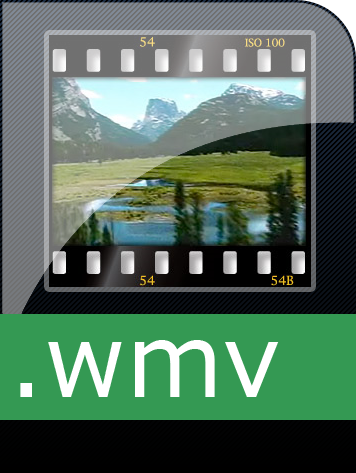
<style>
.page{position:relative;width:356px;height:473px;background:#349953}
.page>*{position:absolute;margin:0}
.t1{font:100px "Verdana";color:#ffffff}
</style>
<div class="page">
<p class="t1" style="left:20px;top:340px;width:259px;height:57px">.wmv</p>
</div>
